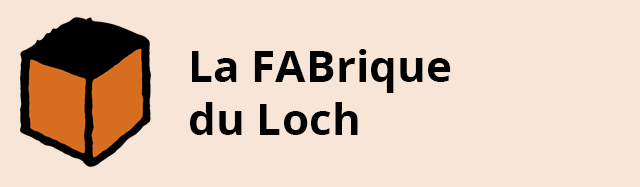
<style>
.page{position:relative;width:640px;height:187px;background:#f7e6d7}
.page>*{position:absolute;margin:0}
.t1{font:44.3px "OpenSans-Bold";color:#010101}
</style>
<div class="page">
<p class="t1" style="left:190px;top:49px;width:261px;height:86px">La FABrique<br>du Loch</p>
</div>
